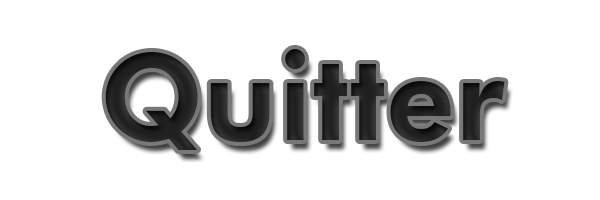
<style>
.page{position:relative;width:600px;height:200px;background:#ffffff}
.page>*{position:absolute;margin:0}
.t1{font:120px "FuturaBT-Heavy";color:#212121}
</style>
<div class="page">
<p class="t1" style="left:105px;top:49px;width:400px;height:101px">Quitter</p>
</div>
